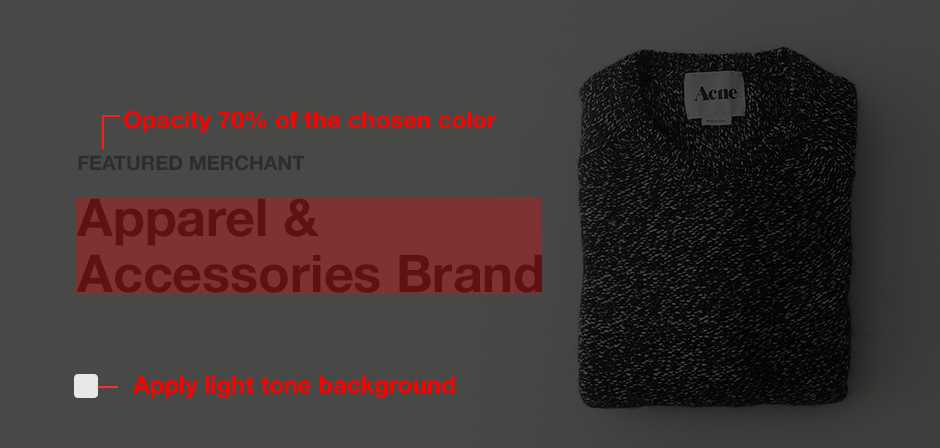
<style>
.page{position:relative;width:940px;height:448px;background:#484847}
.page>*{position:absolute;margin:0}
.t1{font:24px "HelveticaNeue-Bold";color:#ff0000}
.t2{font:20px "HelveticaNeue-Bold";color:#2d2d2c;text-transform:uppercase}
.t3{font:52px/56px "HelveticaNeue-Bold";color:#5f1212}
</style>
<div class="page">
<p class="t1" style="left:123px;top:110px;width:374px;height:23px">Opacity 70% of the chosen color</p>
<p class="t2" style="left:78px;top:155px;width:227px;height:16px">Featured Merchant</p>
<p class="t3" style="left:76px;top:198px;width:466px;height:95px">Apparel &amp;<br>Accessories Brand</p>
<p class="t1" style="left:133px;top:375px;width:322px;height:23px">Apply light tone background</p>
</div>
